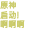
<style>
.page{position:relative;width:32px;height:32px;background:#ffffff}
.page>*{position:absolute;margin:0}
.t1{font:8px "MicrosoftJhengHeiUIRegular";color:#c8c864;font-weight:bold}
</style>
<div class="page">
<p class="t1" style="left:0px;top:1px;width:25px;height:27px">原神<br>启动!<br>啊啊啊</p>
</div>
